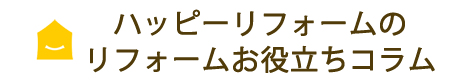
<style>
.page{position:relative;width:454px;height:80px;background:#ffffff}
.page>*{position:absolute;margin:0}
.t1{font:28px/36px "KozGoPr6N-Regular";letter-spacing:0.025em;color:#513c09;font-weight:bold}
</style>
<div class="page">
<p class="t1" style="left:90px;top:9px;width:345px;height:64px;text-align:center">ハッピーリフォームの<br>リフォームお役立ちコラム</p>
</div>
